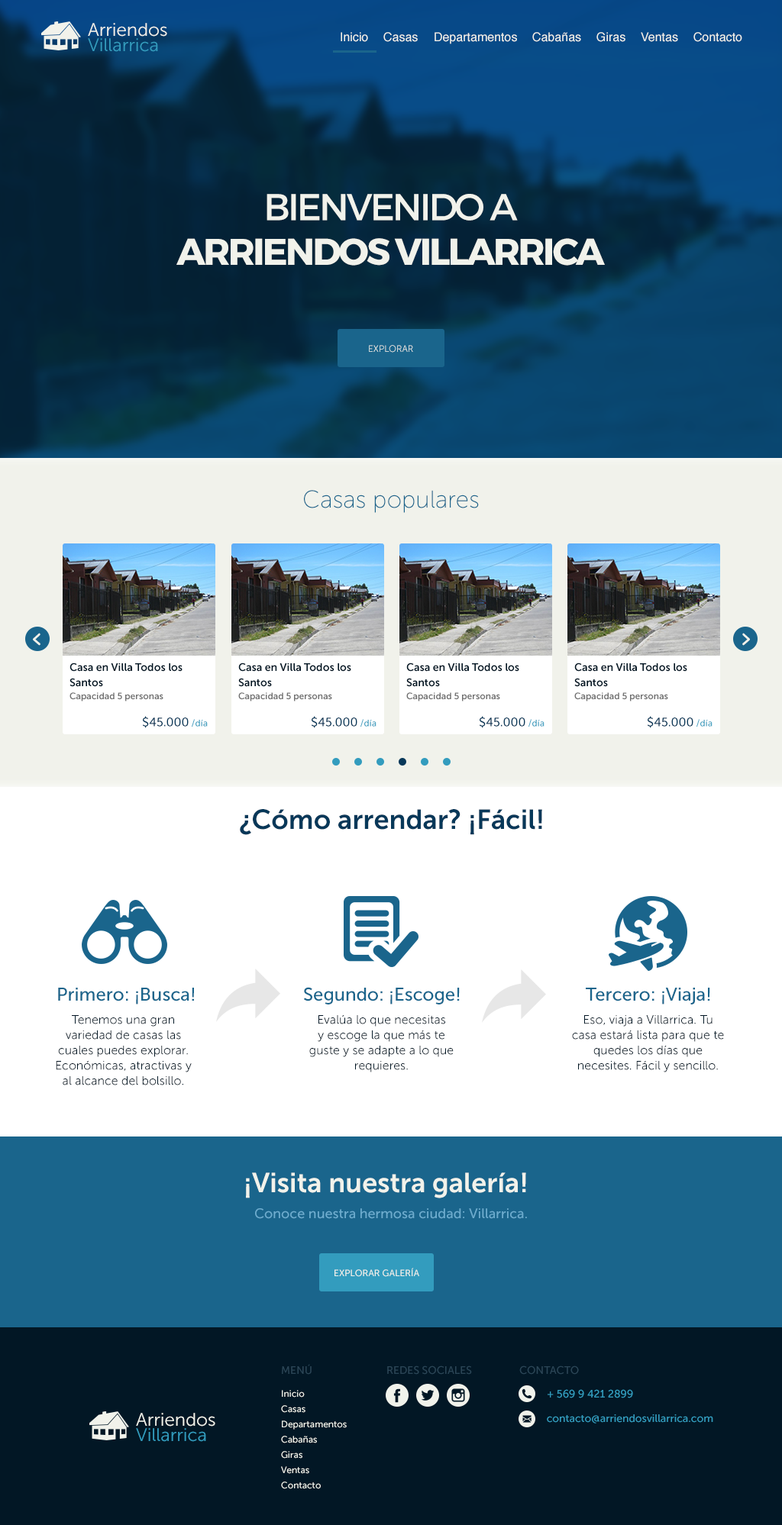
<style>
.page{position:relative;width:782px;height:1525px;background:#ffffff}
.page>*{position:absolute;margin:0}
.t1{font:18.3px/15.3px "MuseoSans-300";color:#339cbe}
.t2{font:18.3px/15.3px "MuseoSans-300";color:#f1f2eb}
.t3{font:12.2px "Helvetica";color:#f1f2eb}
.t4{font:37.3px "Montserrat-Bold";letter-spacing:-0.06em;color:#f1f2eb;text-transform:uppercase}
.t5{font:37.3px "Montserrat-Regular";letter-spacing:-0.06em;color:#f1f2eb;text-transform:uppercase}
.t6{font:9.2px "MuseoSans-300";color:#f1f2eb}
.t7{font:24.2px "MuseoSans-100";color:#1a658c}
.t8{font:10.7px/15.3px "MuseoSans-700";color:#021725}
.t9{font:9.2px "MuseoSans-700";color:#707070}
.t10{font:12.2px "MuseoSans-500";color:#073859}
.t11{font:9.2px "MuseoSans-500";color:#339cbe}
.t12{font:27.5px "MuseoSans-700";color:#073859}
.t13{font:18.3px "MuseoSans-500";color:#1a658c}
.t14{font:12.2px/15.3px "MuseoSans-300";color:#021725}
.t15{font:27.5px "MuseoSans-700";color:#f1f2eb}
.t16{font:13.7px "MuseoSans-500";color:#6dadcf}
.t17{font:9.2px "MuseoSans-500";color:#f1f2eb}
.t18{font:10.7px "MuseoSans-500";color:#2b4556}
.t19{font:10.7px "MuseoSans-500";color:#339cbe}
</style>
<div class="page">
<p class="t1" style="left:88px;top:23px;width:79px;height:29px"><span class="t2">Arriendos<br></span>Villarrica</p>
<p class="t3" style="left:340px;top:32px;width:28px;height:10px">Inicio</p>
<p class="t3" style="left:383px;top:32px;width:35px;height:10px">Casas</p>
<p class="t3" style="left:434px;top:32px;width:83px;height:12px">Departamentos</p>
<p class="t3" style="left:532px;top:32px;width:49px;height:10px">Cabañas</p>
<p class="t3" style="left:596px;top:32px;width:29px;height:10px">Giras</p>
<p class="t3" style="left:641px;top:32px;width:37px;height:10px">Ventas</p>
<p class="t3" style="left:693px;top:32px;width:49px;height:10px">Contacto</p>
<p class="t4" style="left:176px;top:194px;width:429px;height:72px;text-align:center"><span class="t5">Bienvenido a<br></span>Arriendos Villarrica</p>
<p class="t6" style="left:369px;top:345px;width:44px;height:8px">EXPLORAR</p>
<p class="t7" style="left:304px;top:490px;width:175px;height:23px">Casas populares</p>
<p class="t8" style="left:69px;top:663px;width:113px;height:24px">Casa en Villa Todos los <br>Santos</p>
<p class="t8" style="left:238px;top:663px;width:113px;height:24px">Casa en Villa Todos los <br>Santos</p>
<p class="t8" style="left:406px;top:663px;width:113px;height:24px">Casa en Villa Todos los <br>Santos</p>
<p class="t8" style="left:574px;top:663px;width:113px;height:24px">Casa en Villa Todos los <br>Santos</p>
<p class="t9" style="left:69px;top:692px;width:94px;height:10px">Capacidad 5 personas</p>
<p class="t9" style="left:238px;top:692px;width:94px;height:10px">Capacidad 5 personas</p>
<p class="t9" style="left:406px;top:692px;width:94px;height:10px">Capacidad 5 personas</p>
<p class="t9" style="left:574px;top:692px;width:94px;height:10px">Capacidad 5 personas</p>
<p class="t10" style="left:142px;top:716px;width:66px;height:12px">$45.000 <span class="t11">/día</span></p>
<p class="t10" style="left:311px;top:716px;width:65px;height:12px">$45.000 <span class="t11">/día</span></p>
<p class="t10" style="left:479px;top:716px;width:65px;height:12px">$45.000 <span class="t11">/día</span></p>
<p class="t10" style="left:647px;top:716px;width:65px;height:12px">$45.000 <span class="t11">/día</span></p>
<p class="t12" style="left:240px;top:809px;width:302px;height:26px">¿Cómo arrendar? ¡Fácil!</p>
<p class="t13" style="left:58px;top:988px;width:136px;height:17px">Primero: ¡Busca!</p>
<p class="t13" style="left:304px;top:987px;width:156px;height:18px">Segundo: ¡Escoge!</p>
<p class="t13" style="left:586px;top:988px;width:124px;height:17px">Tercero: ¡Viaja!</p>
<p class="t14" style="left:56px;top:1015px;width:136px;height:71px;text-align:center">Tenemos una gran <br>variedad de casas las cuales puedes explorar. Económicas, atractivas y al alcance del bolsillo.</p>
<p class="t14" style="left:309px;top:1015px;width:144px;height:58px;text-align:center">Evalúa lo que necesitas<br>y escoge la que más te<br>guste y se adapte a lo que<br>requieres.</p>
<p class="t14" style="left:572px;top:1015px;width:152px;height:58px;text-align:center">Eso, viaja a Villarrica. Tu casa estará lista para que te quedes los días que necesites. Fácil y sencillo.</p>
<p class="t15" style="left:246px;top:1173px;width:280px;height:26px">¡Visita nuestra galería!</p>
<p class="t16" style="left:255px;top:1209px;width:272px;height:10px">Conoce nuestra hermosa ciudad: Villarrica.</p>
<p class="t17" style="left:334px;top:1268px;width:85px;height:9px">EXPLORAR GALERÍA</p>
<p class="t18" style="left:282px;top:1364px;width:29px;height:11px">MENÚ</p>
<p class="t18" style="left:387px;top:1366px;width:85px;height:9px">REDES SOCIALES</p>
<p class="t18" style="left:519px;top:1366px;width:60px;height:9px">CONTACTO</p>
<p class="t17" style="left:282px;top:1390px;width:23px;height:8px">Inicio</p>
<p class="t19" style="left:547px;top:1389px;width:86px;height:10px">+ 569 9 421 2899</p>
<p class="t17" style="left:281px;top:1405px;width:24px;height:8px">Casas</p>
<p class="t1" style="left:136px;top:1413px;width:79px;height:29px"><span class="t2">Arriendos<br></span>Villarrica</p>
<p class="t17" style="left:282px;top:1421px;width:65px;height:9px">Departamentos</p>
<p class="t19" style="left:547px;top:1415px;width:166px;height:9px">contacto@arriendosvillarrica.com</p>
<p class="t17" style="left:281px;top:1436px;width:36px;height:8px">Cabañas</p>
<p class="t17" style="left:281px;top:1451px;width:21px;height:8px">Giras</p>
<p class="t17" style="left:281px;top:1467px;width:28px;height:7px">Ventas</p>
<p class="t17" style="left:281px;top:1482px;width:40px;height:7px">Contacto</p>
</div>
